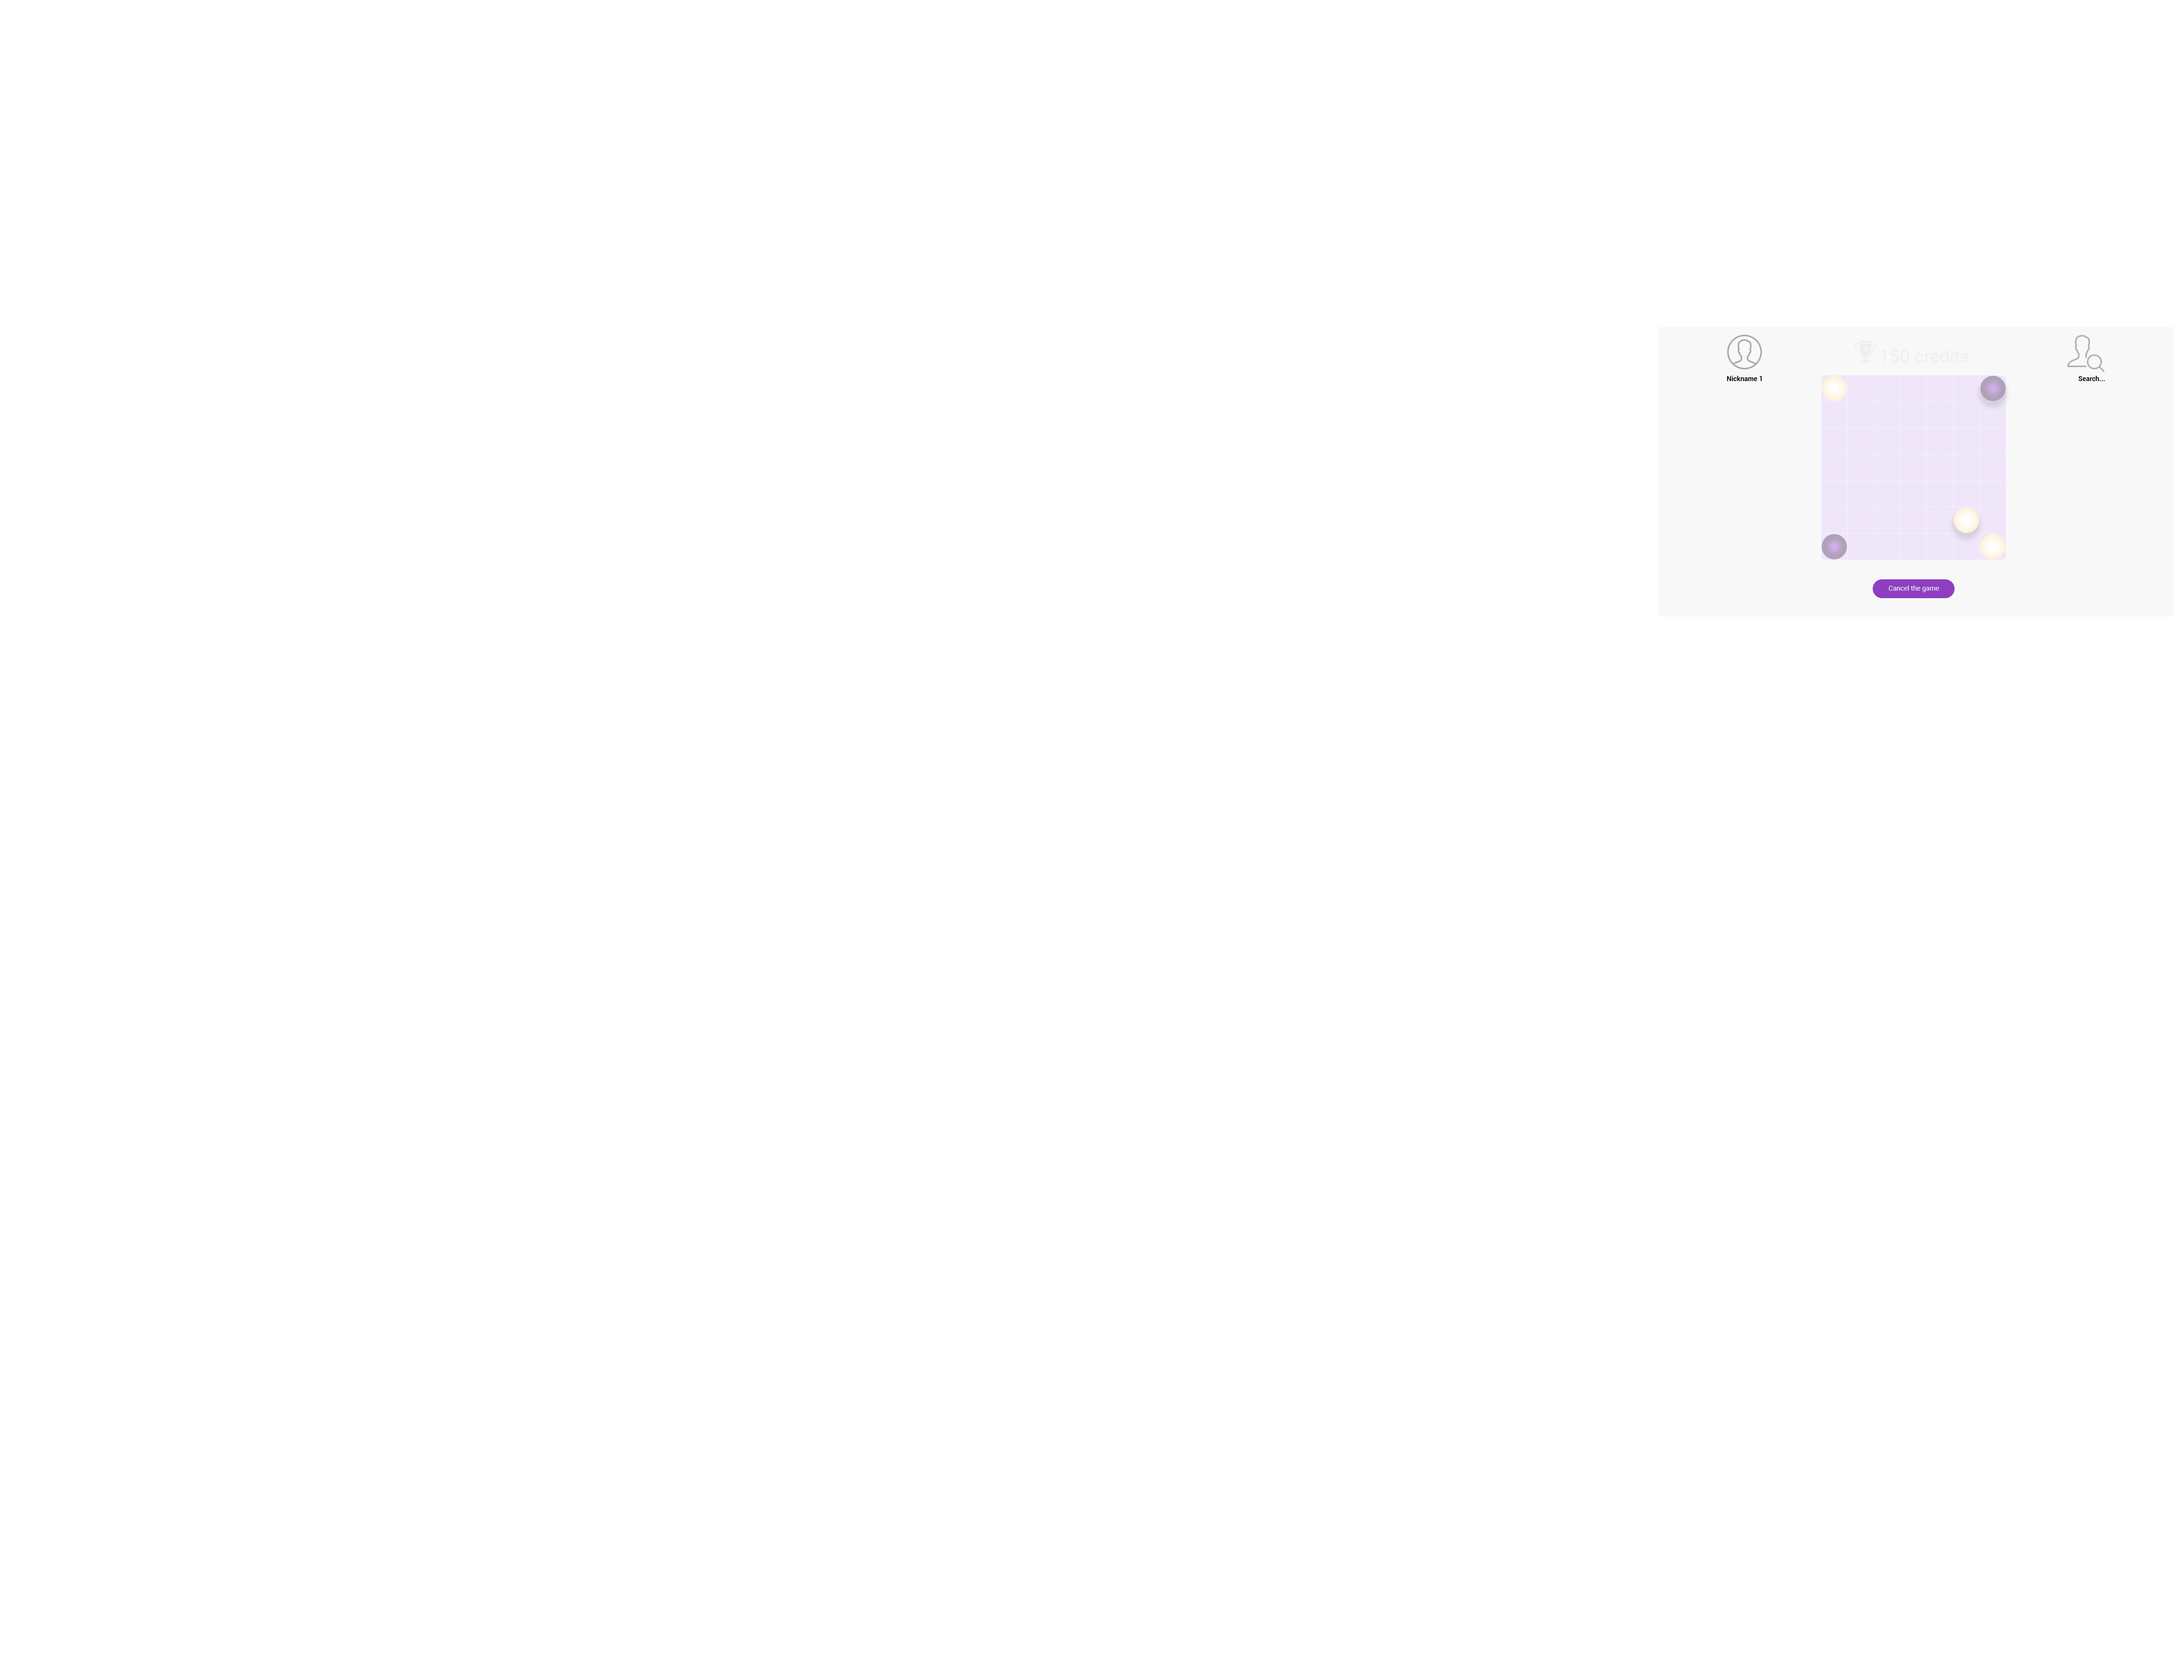
<style>
.page{position:relative;width:2180px;height:1669px;background:#ffffff}
.page>*{position:absolute;margin:0}
.t1{font:18.2px "Roboto-Regular";color:#efefef}
.t2{font:6.8px "Roboto-Bold";color:#000000}
.t3{font:6.8px "Roboto-Regular";color:#ffffff}
</style>
<div class="page">
<p class="t1" style="left:1880px;top:349px;width:88px;height:14px">150 credits</p>
<p class="t2" style="left:1726px;top:376px;width:36px;height:5px">Nickname 1</p>
<p class="t2" style="left:2078px;top:376px;width:27px;height:5px">Search...</p>
<p class="t3" style="left:1888px;top:585px;width:51px;height:7px">Cancel the game</p>
</div>
